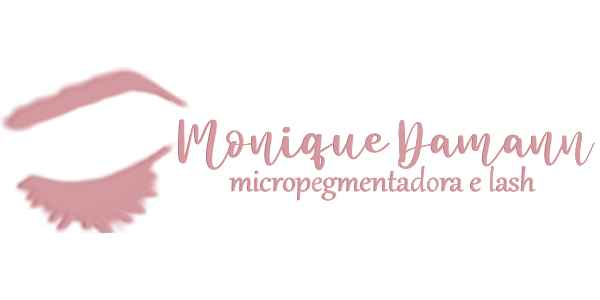
<style>
.page{position:relative;width:600px;height:300px;background:#ffffff}
.page>*{position:absolute;margin:0}
.t1{font:41.8px "BeautyMermaidPersonalUse";color:#d49aa0}
.t2{font:37.5px "Gabriola";color:#d09399}
.t3{font:37.5px "Gabriola";color:#d49aa0}
</style>
<div class="page">
<p class="t1" style="left:178px;top:119px;width:417px;height:52px">Monique Damann</p>
<p class="t1" style="left:179px;top:119px;width:416px;height:52px">Monique Damann</p>
<p class="t2" style="left:229px;top:166px;width:306px;height:35px">micropegmentadora e lash</p>
<p class="t3" style="left:230px;top:166px;width:306px;height:35px">micropegmentadora e lash</p>
</div>
